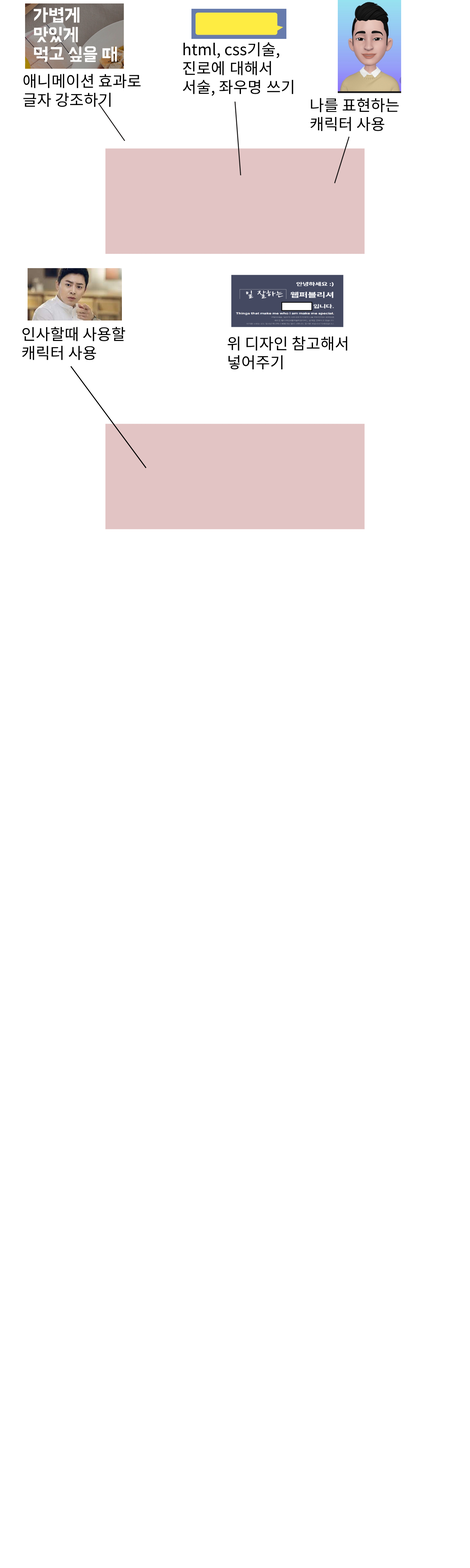
<style>
.page{position:relative;width:470px;height:1568px;background:#ffffff}
.page>*{position:absolute;margin:0}
.t1{font:15.7px "NotoSansKR-Regular";color:#000000}
</style>
<div class="page">
<p class="t1" style="left:183px;top:42px;width:111px;height:54px">html, css기술, 진로에 대해서 서술, 좌우명 쓰기</p>
<p class="t1" style="left:23px;top:74px;width:118px;height:33px">애니메이션 효과로 글자 강조하기</p>
<p class="t1" style="left:311px;top:98px;width:88px;height:33px">나를 표현하는 캐릭터 사용</p>
<p class="t1" style="left:22px;top:327px;width:103px;height:33px">인사할때 사용할 캐릭터 사용</p>
<p class="t1" style="left:228px;top:336px;width:119px;height:33px">위 디자인 참고해서 넣어주기</p>
</div>
